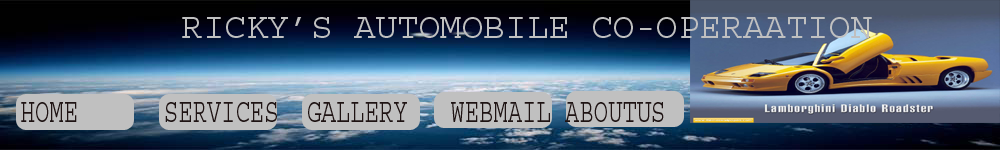
<style>
.page{position:relative;width:1000px;height:150px}
.page>*{position:absolute;margin:0}
.t1{font:36px "Courier";color:#c0c0c0}
.t2{font:33.6px "Courier";color:#1e1313;scale:0.71 1}
</style>
<div class="page">
<p class="t1" style="left:182px;top:17px;width:690px;height:21px">RICKY’S AUTOMOBILE CO-OPERAATION</p>
<p class="t2" style="left:21px;top:102px;width:643px;height:20px">HOME      SERVICES  GALLERY   WEBMAIL ABOUTUS</p>
</div>
